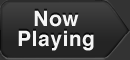
<style>
.page{position:relative;width:130px;height:60px}
.page>*{position:absolute;margin:0}
.t1{font:21px/20px "Helvetica-Bold";letter-spacing:0.025em;color:#ffffff}
</style>
<div class="page">
<p class="t1" style="left:18px;top:10px;width:76px;height:41px;text-align:center;opacity:0.95">Now<br>Playing</p>
</div>
